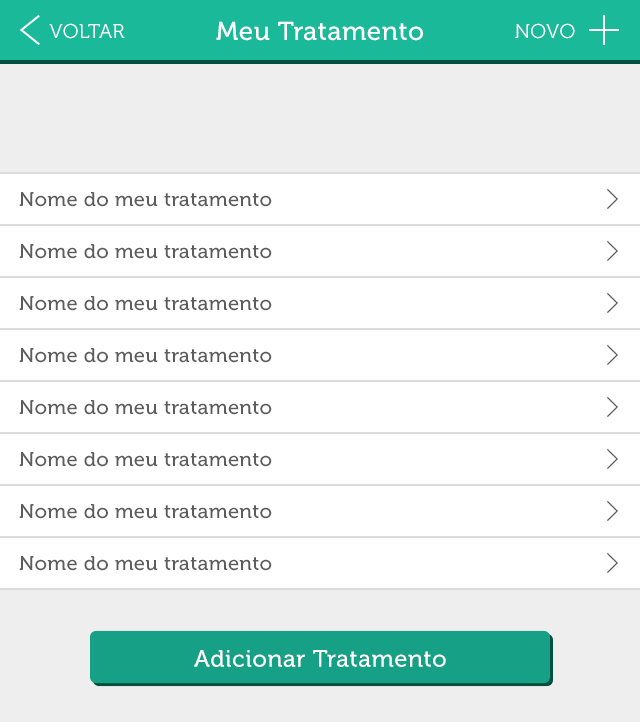
<style>
.page{position:relative;width:640px;height:722px;background:#ffffff}
.page>*{position:absolute;margin:0}
.t1{font:20px "Museo300-Regular";letter-spacing:0.02em;color:#ffffff;text-transform:uppercase}
.t2{font:26px "Museo500-Regular";letter-spacing:0.02em;color:#ffffff}
.t3{font:20px "Museo500-Regular";letter-spacing:0.02em;color:#5c5c5c}
.t4{font:23.8px "Museo500-Regular";letter-spacing:0.02em;color:#ffffff}
</style>
<div class="page">
<p class="t1" style="left:49px;top:23px;width:76px;height:16px">Voltar</p>
<p class="t2" style="left:216px;top:21px;width:207px;height:20px">Meu Tratamento</p>
<p class="t1" style="left:515px;top:23px;width:60px;height:16px">NOVO</p>
<p class="t3" style="left:19px;top:192px;width:253px;height:15px">Nome do meu tratamento</p>
<p class="t3" style="left:19px;top:244px;width:253px;height:15px">Nome do meu tratamento</p>
<p class="t3" style="left:19px;top:296px;width:253px;height:15px">Nome do meu tratamento</p>
<p class="t3" style="left:19px;top:348px;width:253px;height:15px">Nome do meu tratamento</p>
<p class="t3" style="left:19px;top:400px;width:253px;height:15px">Nome do meu tratamento</p>
<p class="t3" style="left:19px;top:452px;width:253px;height:15px">Nome do meu tratamento</p>
<p class="t3" style="left:19px;top:504px;width:253px;height:15px">Nome do meu tratamento</p>
<p class="t3" style="left:19px;top:556px;width:253px;height:15px">Nome do meu tratamento</p>
<p class="t4" style="left:194px;top:650px;width:252px;height:17px">Adicionar Tratamento</p>
</div>
